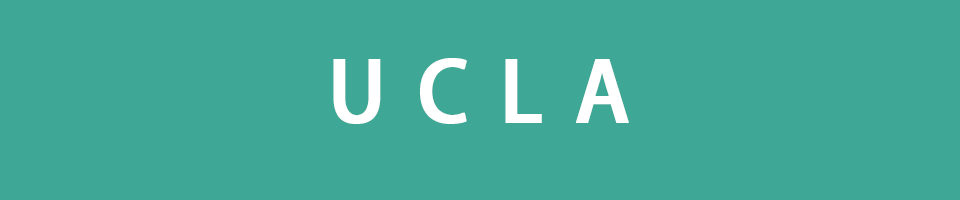
<style>
.page{position:relative;width:960px;height:200px;background:#3ea795}
.page>*{position:absolute;margin:0}
.t1{font:140.6px "AdobeHeitiStd-Regular";letter-spacing:0.36em;color:#ffffff;font-weight:bold}
</style>
<div class="page">
<p class="t1" style="left:333px;top:58px;width:296px;height:66px">UCLA</p>
</div>
